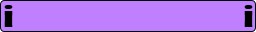
<style>
.page{position:relative;width:256px;height:32px;background:#bf7fff}
.page>*{position:absolute;margin:0}
.t1{font:29.7px "Broadway";color:#000000}
</style>
<div class="page">
<p class="t1" style="left:4px;top:5px;width:9px;height:22px">i</p>
<p class="t1" style="left:244px;top:5px;width:9px;height:22px">i</p>
</div>
